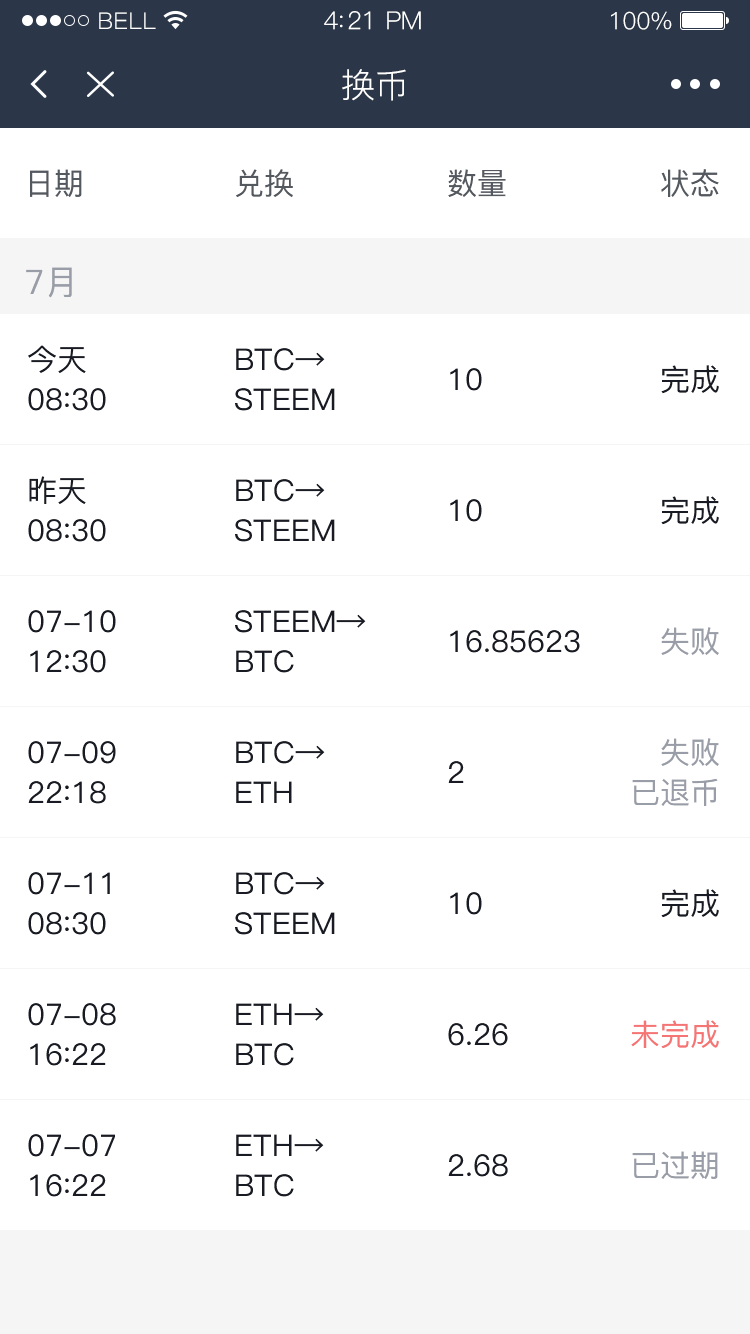
<style>
.page{position:relative;width:750px;height:1334px;background:#ffffff}
.page>*{position:absolute;margin:0}
.t1{font:23px "PingFang-SC-Regular";letter-spacing:0.02em;color:#ffffff}
.t2{font:25px "PingFang-SC-Regular";letter-spacing:-0.02em;color:#ffffff}
.t3{font:24px "PingFang-SC-Regular";letter-spacing:-0.02em;color:#ffffff}
.t4{font:34px "PingFang-SC-Regular";color:#ffffff}
.t5{font:30px "PingFang-SC-Medium";color:#545960}
.t6{font:34px "PingFang-SC-Medium";color:#999da7}
.t7{font:30px/40px "PingFang-SC-Medium";color:#181b23}
.t8{font:30px "PingFang-SC-Medium";color:#181b23}
.t9{font:30px "PingFang-SC-Medium";color:#999da7}
.t10{font:30px/40px "PingFang-SC-Medium";color:#999da7}
.t11{font:30px "PingFang-SC-Medium";color:#f47574}
</style>
<div class="page">
<p class="t1" style="left:99px;top:12px;width:57px;height:17px">BELL</p>
<p class="t2" style="left:324px;top:11px;width:97px;height:19px">4:21 PM</p>
<p class="t3" style="left:611px;top:11px;width:61px;height:19px">100%</p>
<p class="t4" style="left:342px;top:69px;width:64px;height:32px">换币</p>
<p class="t5" style="left:30px;top:169px;width:52px;height:28px">日期</p>
<p class="t5" style="left:236px;top:169px;width:57px;height:28px">兑换</p>
<p class="t5" style="left:448px;top:169px;width:58px;height:28px">数量</p>
<p class="t5" style="left:661px;top:169px;width:58px;height:28px">状态</p>
<p class="t6" style="left:26px;top:267px;width:46px;height:31px">7月</p>
<p class="t7" style="left:28px;top:345px;width:78px;height:66px">今天<br>08:30</p>
<p class="t7" style="left:235px;top:348px;width:100px;height:63px">BTC→<br>STEEM</p>
<p class="t8" style="left:661px;top:365px;width:58px;height:29px">完成</p>
<p class="t8" style="left:450px;top:368px;width:32px;height:23px">10</p>
<p class="t7" style="left:28px;top:476px;width:78px;height:66px">昨天<br>08:30</p>
<p class="t7" style="left:235px;top:479px;width:100px;height:63px">BTC→<br>STEEM</p>
<p class="t8" style="left:661px;top:496px;width:58px;height:29px">完成</p>
<p class="t8" style="left:450px;top:499px;width:32px;height:23px">10</p>
<p class="t7" style="left:28px;top:610px;width:88px;height:63px">07-10<br>12:30</p>
<p class="t7" style="left:235px;top:610px;width:131px;height:63px">STEEM→<br>BTC</p>
<p class="t8" style="left:450px;top:630px;width:130px;height:23px">16.85623</p>
<p class="t9" style="left:661px;top:627px;width:58px;height:28px">失败</p>
<p class="t7" style="left:28px;top:741px;width:88px;height:63px">07-09<br>22:18</p>
<p class="t7" style="left:236px;top:741px;width:89px;height:62px">BTC→<br>ETH</p>
<p class="t10" style="left:632px;top:738px;width:87px;height:68px;text-align:right">失败<br>已退币</p>
<p class="t8" style="left:448px;top:761px;width:16px;height:22px">2</p>
<p class="t7" style="left:28px;top:872px;width:82px;height:63px">07-11<br>08:30</p>
<p class="t7" style="left:235px;top:872px;width:100px;height:63px">BTC→<br>STEEM</p>
<p class="t8" style="left:450px;top:892px;width:32px;height:23px">10</p>
<p class="t8" style="left:661px;top:889px;width:58px;height:29px">完成</p>
<p class="t7" style="left:28px;top:1003px;width:88px;height:63px">07-08<br>16:22</p>
<p class="t7" style="left:236px;top:1003px;width:88px;height:63px">ETH→<br>BTC</p>
<p class="t8" style="left:448px;top:1023px;width:60px;height:23px">6.26</p>
<p class="t11" style="left:631px;top:1020px;width:88px;height:29px">未完成</p>
<p class="t7" style="left:28px;top:1134px;width:87px;height:63px">07-07<br>16:22</p>
<p class="t7" style="left:236px;top:1134px;width:88px;height:63px">ETH→<br>BTC</p>
<p class="t8" style="left:448px;top:1154px;width:60px;height:23px">2.68</p>
<p class="t9" style="left:632px;top:1151px;width:86px;height:28px">已过期</p>
</div>
